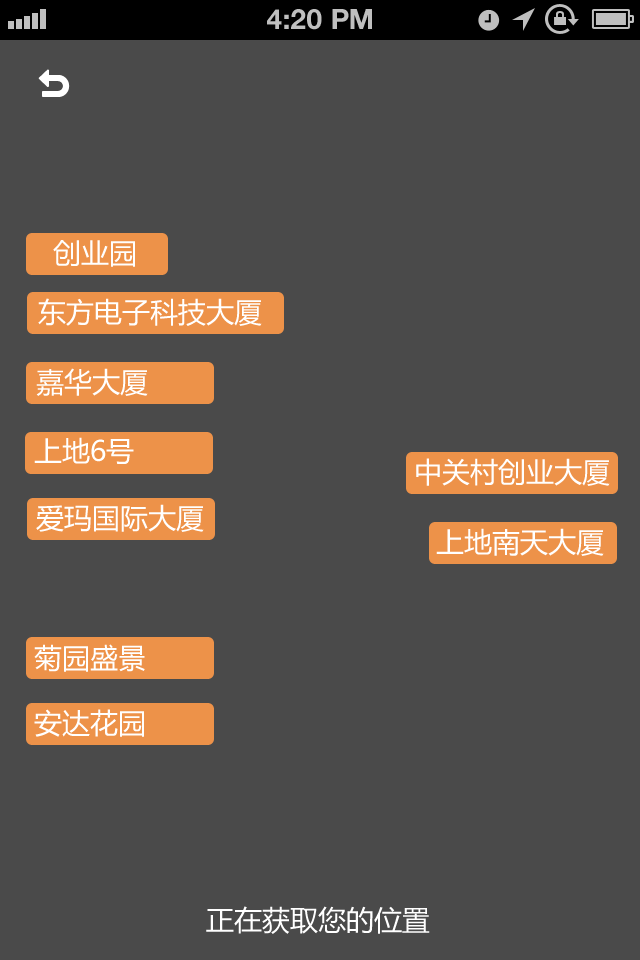
<style>
.page{position:relative;width:640px;height:960px;background:#4a4a4a}
.page>*{position:absolute;margin:0}
.t1{font:28px "HelveticaNeue-Bold";color:#bfbfbf;text-transform:uppercase}
.t2{font:28px "MicrosoftYaHei";color:#ffffff}
</style>
<div class="page">
<p class="t1" style="left:267px;top:9px;width:105px;height:21px">4:20 PM</p>
<p class="t2" style="left:53px;top:240px;width:82px;height:27px">创业园</p>
<p class="t2" style="left:38px;top:298px;width:224px;height:28px">东方电子科技大厦</p>
<p class="t2" style="left:36px;top:368px;width:112px;height:28px">嘉华大厦</p>
<p class="t2" style="left:34px;top:437px;width:100px;height:27px">上地6号</p>
<p class="t2" style="left:416px;top:458px;width:194px;height:28px">中关村创业大厦</p>
<p class="t2" style="left:36px;top:504px;width:168px;height:28px">爱玛国际大厦</p>
<p class="t2" style="left:436px;top:528px;width:168px;height:28px">上地南天大厦</p>
<p class="t2" style="left:34px;top:644px;width:111px;height:28px">菊园盛景</p>
<p class="t2" style="left:34px;top:709px;width:110px;height:28px">安达花园</p>
<p class="t2" style="left:206px;top:906px;width:224px;height:28px">正在获取您的位置</p>
</div>
